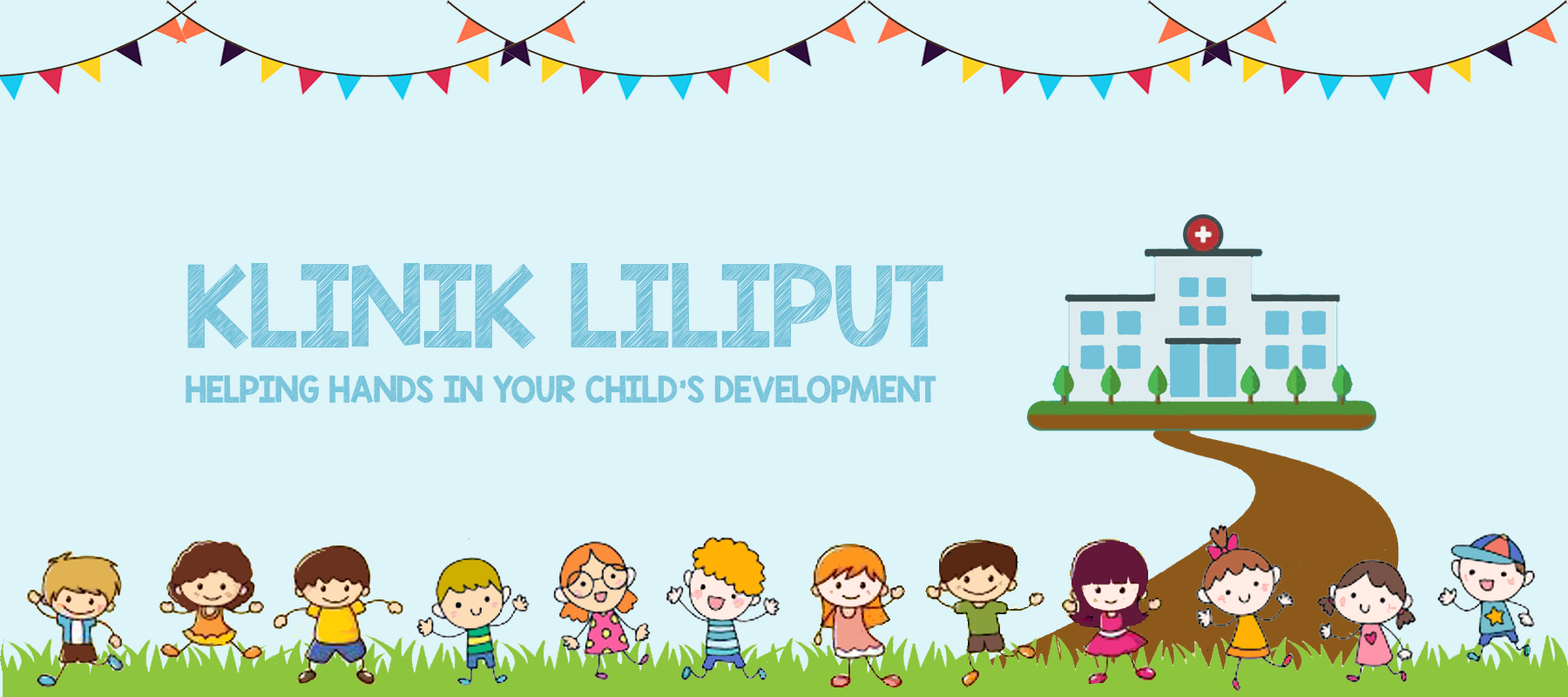
<style>
.page{position:relative;width:1568px;height:697px;background:#ddf4f9}
.page>*{position:absolute;margin:0}
.t1{font:90.7px "KGBlankSpaceSketch";color:#71c1d9}
.t2{font:29px "KGBlankSpaceSketch";color:#71c1d9}
</style>
<div class="page">
<p class="t1" style="left:187px;top:262px;width:756px;height:87px">KLINIK LILIPUT</p>
<p class="t2" style="left:186px;top:375px;width:750px;height:28px">HELPING HANDS IN YOUR CHILD’S DEVELOPMENT</p>
</div>
